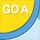
<style>
.page{position:relative;width:40px;height:40px;background:#ffde15}
.page>*{position:absolute;margin:0}
.t1{font:11.4px "Roboto-Regular";color:#ffffff;font-weight:bold}
</style>
<div class="page">
<p class="t1" style="left:3px;top:4px;width:26px;height:10px">GO A</p>
</div>
